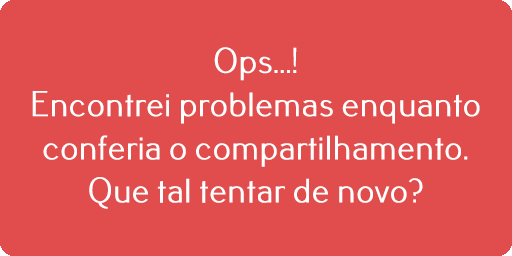
<style>
.page{position:relative;width:512px;height:256px;background:#e04d4c}
.page>*{position:absolute;margin:0}
.t1{font:36px "Pfennig";color:#ffffff}
</style>
<div class="page">
<p class="t1" style="left:32px;top:47px;width:448px;height:162px;text-align:center">Ops...!<br>Encontrei problemas enquanto<br>conferia o compartilhamento.<br>Que tal tentar de novo?</p>
</div>
